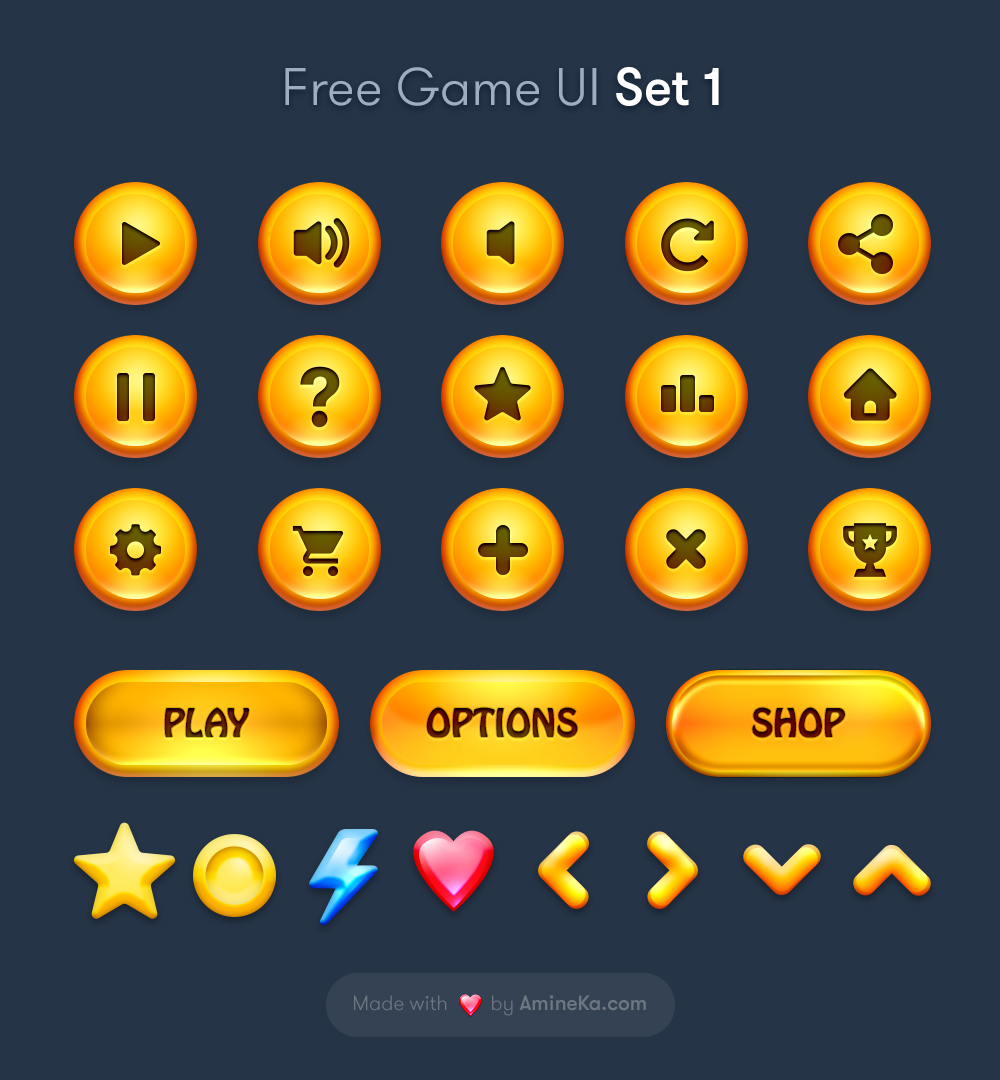
<style>
.page{position:relative;width:1000px;height:1080px;background:#253447}
.page>*{position:absolute;margin:0}
.t1{font:53px "GT-Walsheim-Light";color:#9daec2}
.t2{font:53px "GT-Walsheim-Medium";color:#ffffff}
.t3{font:35px "HoboStd"}
.t4{font:35px "HoboStd";text-transform:uppercase}
.t5{font:35px "HoboStd";color:#500000;text-transform:uppercase}
.t6{font:20.7px "GT-Walsheim-Light";color:#6e7681}
.t7{font:20.7px "GT-Walsheim-Medium";color:#6e7681}
</style>
<div class="page">
<p class="t1" style="left:285px;top:67px;width:434px;height:39px">Free Game UI <span class="t2">Set 1</span></p>
<p class="t3" style="left:164px;top:707px;width:85px;height:30px">PLAY</p>
<p class="t4" style="left:426px;top:707px;width:152px;height:31px">Options</p>
<p class="t5" style="left:752px;top:707px;width:93px;height:31px">Shop</p>
<p class="t6" style="left:354px;top:995px;width:292px;height:21px">Made with        by <span class="t7">AmineKa.com</span></p>
</div>
